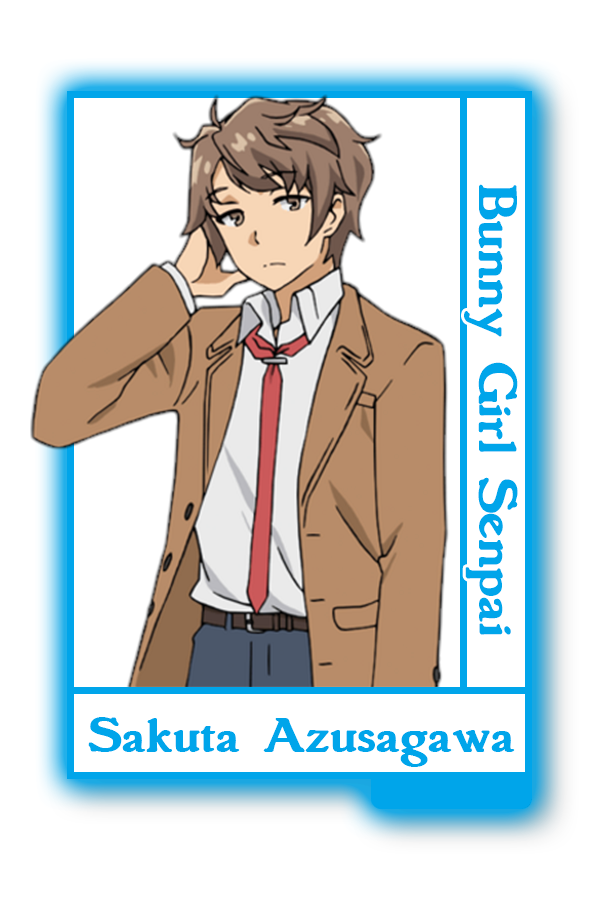
<style>
.page{position:relative;width:600px;height:900px;background:#ffffff}
.page>*{position:absolute;margin:0}
.t1{font:48.8px "Grantham-Bold";color:#0ba3e1}
.t2{font:45.6px "Grantham-Bold";color:#0ba3e1}
</style>
<div class="page">
<p class="t1" style="left:464px;top:184px;width:54px;height:451px;rotate:90deg">Bunny Girl Senpai</p>
<p class="t2" style="left:88px;top:717px;width:427px;height:50px">Sakuta Azusagawa</p>
</div>
